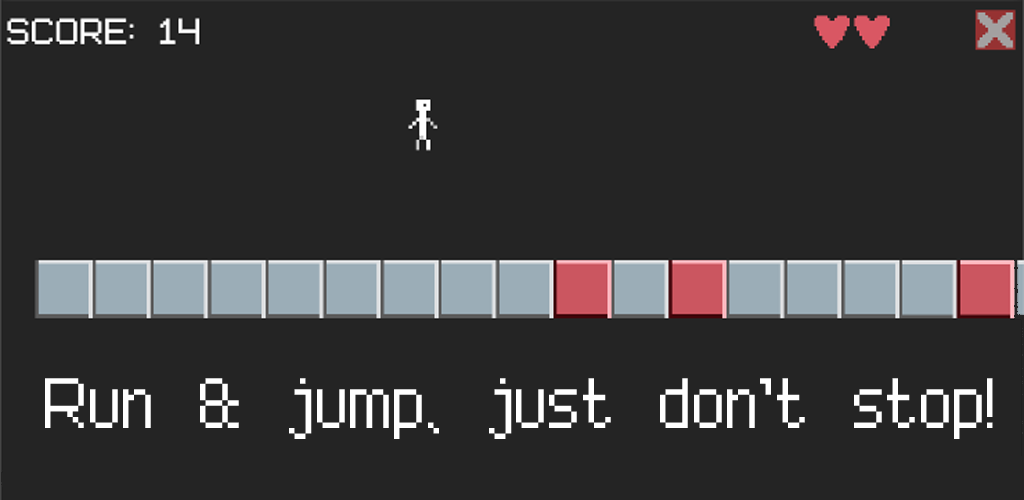
<style>
.page{position:relative;width:1024px;height:500px;background:#242424}
.page>*{position:absolute;margin:0}
.t1{font:88.7px "Advanced Pixel-7";color:#ffffff}
</style>
<div class="page">
<p class="t1" style="left:45px;top:378px;width:948px;height:61px">Run &amp; jump, just don’t stop!</p>
</div>
